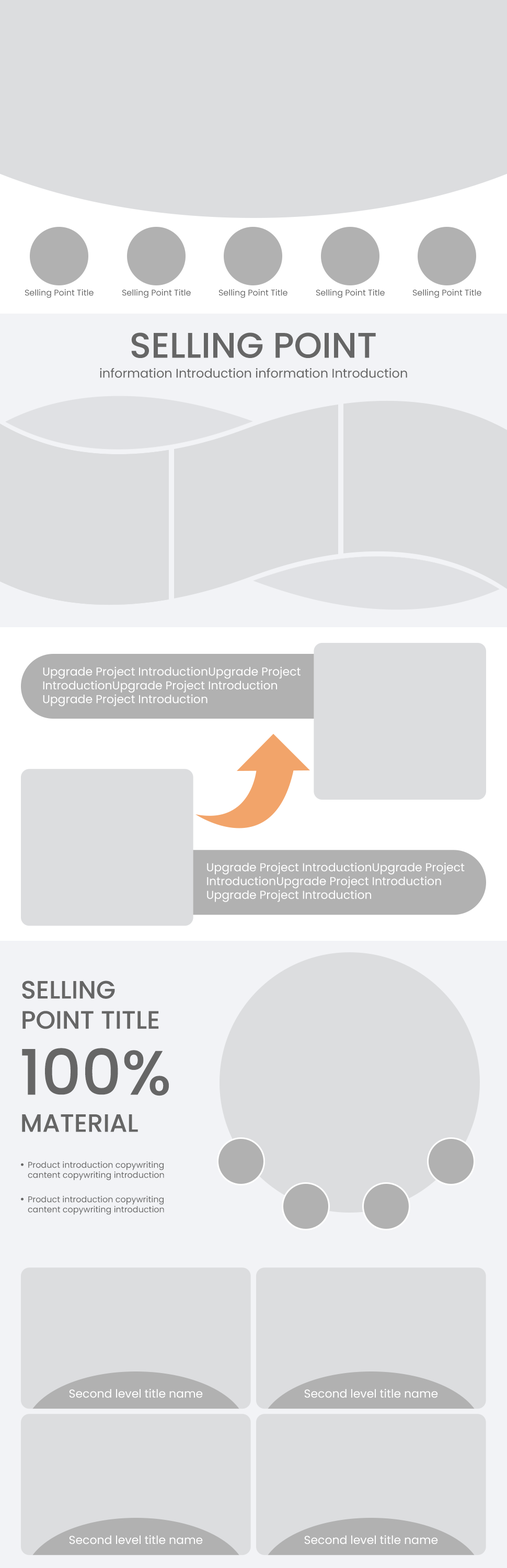
<style>
.page{position:relative;width:507px;height:1568px;background:#dcdddf}
.page>*{position:absolute;margin:0}
.t1{font:8.4px "Poppins-Regular";color:#666666}
.t2{font:35.5px "Poppins-Medium";color:#666666}
.t3{font:12.5px "Poppins-Regular";color:#666666}
.t4{font:11.5px "Poppins-Regular";color:#ffffff}
.t5{font:25.1px "Poppins-Medium";color:#666666}
.t6{font:62.7px "Poppins-Medium";color:#666666}
</style>
<div class="page">
<p class="t1" style="left:25px;top:289px;width:69px;height:9px">Selling Point Title</p>
<p class="t1" style="left:122px;top:289px;width:69px;height:9px">Selling Point Title</p>
<p class="t1" style="left:219px;top:289px;width:68px;height:9px">Selling Point Title</p>
<p class="t1" style="left:316px;top:289px;width:69px;height:9px">Selling Point Title</p>
<p class="t1" style="left:413px;top:289px;width:68px;height:9px">Selling Point Title</p>
<p class="t2" style="left:131px;top:332px;width:245px;height:26px">SELLING POINT</p>
<p class="t3" style="left:100px;top:368px;width:307px;height:10px">information Introduction information Introduction</p>
<p class="t4" style="left:43px;top:666px;width:258px;height:41px">Upgrade Project IntroductionUpgrade Project<br>IntroductionUpgrade Project Introduction<br>Upgrade Project Introduction</p>
<p class="t4" style="left:207px;top:862px;width:258px;height:40px">Upgrade Project IntroductionUpgrade Project<br>IntroductionUpgrade Project Introduction<br>Upgrade Project Introduction</p>
<p class="t5" style="left:22px;top:981px;width:137px;height:48px">SELLING<br>POINT TITLE</p>
<p class="t6" style="left:22px;top:1048px;width:147px;height:48px">100%</p>
<p class="t5" style="left:22px;top:1114px;width:116px;height:18px">MATERIAL</p>
<p class="t1" style="left:28px;top:1161px;width:136px;height:19px">Product introduction copywriting<br>cantent copywriting introduction</p>
<p class="t1" style="left:28px;top:1196px;width:136px;height:19px">Product introduction copywriting<br>cantent copywriting introduction</p>
<p class="t4" style="left:69px;top:1389px;width:134px;height:9px">Second level title name</p>
<p class="t4" style="left:304px;top:1389px;width:134px;height:9px">Second level title name</p>
<p class="t4" style="left:69px;top:1535px;width:134px;height:9px">Second level title name</p>
<p class="t4" style="left:304px;top:1535px;width:134px;height:9px">Second level title name</p>
</div>
